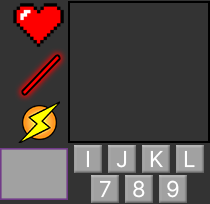
<style>
.page{position:relative;width:210px;height:204px;background:#333333}
.page>*{position:absolute;margin:0}
.t1{font:22px "InterUI-Regular";color:#ffffff}
</style>
<div class="page">
<p class="t1" style="left:86px;top:150px;width:3px;height:18px">I</p>
<p class="t1" style="left:116px;top:150px;width:11px;height:18px">J</p>
<p class="t1" style="left:150px;top:150px;width:13px;height:18px">K</p>
<p class="t1" style="left:184px;top:150px;width:11px;height:18px">L</p>
<p class="t1" style="left:100px;top:180px;width:11px;height:18px">7</p>
<p class="t1" style="left:133px;top:180px;width:12px;height:18px">8</p>
<p class="t1" style="left:167px;top:180px;width:12px;height:18px">9</p>
</div>
